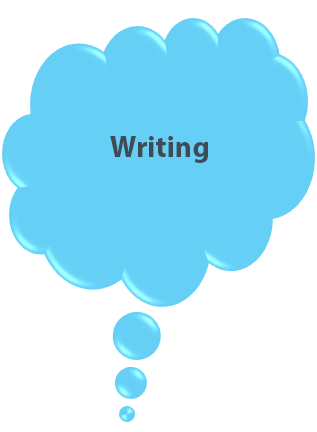
<style>
.page{position:relative;width:317px;height:432px;background:#ffffff}
.page>*{position:absolute;margin:0}
.t1{font:30px "MyriadPro-Bold";color:#3f4b55}
</style>
<div class="page">
<p class="t1" style="left:110px;top:136px;width:98px;height:27px">Writing</p>
</div>
